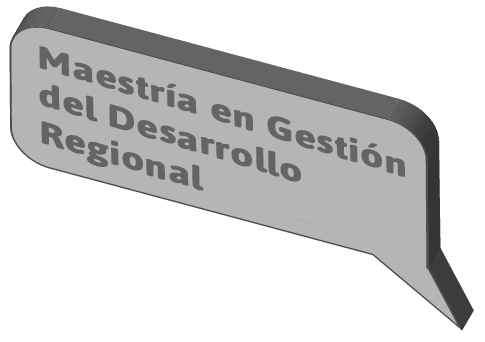
<style>
.page{position:relative;width:485px;height:342px;background:#ffffff}
.page>*{position:absolute;margin:0}
.t1{font:31.3px "Asap-Bold";color:#646464;font-weight:bold;scale:1.32 1}
</style>
<div class="page">
<p class="t1" style="left:39px;top:46px;width:366px;height:145px;rotate:17deg">Maestría en Gestión<br>del Desarrollo <br>Regional</p>
</div>
